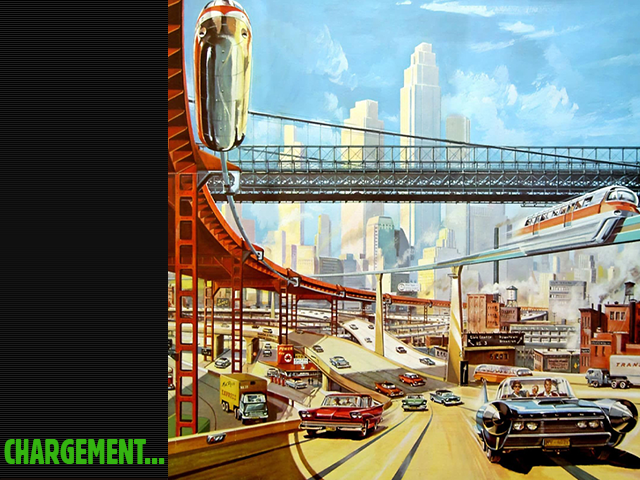
<style>
.page{position:relative;width:640px;height:480px}
.page>*{position:absolute;margin:0}
.t1{font:35.2px "Gothic821CondensedBT-Regular";color:#34b410;scale:0.91 1}
</style>
<div class="page">
<p class="t1" style="left:4px;top:439px;width:161px;height:25px">CHARGEMENT...</p>
</div>
